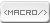
<style>
.page{position:relative;width:50px;height:23px}
.page>*{position:absolute;margin:0}
.t1{font:8px "04b08";color:#807f7f}
</style>
<div class="page">
<p class="t1" style="left:4px;top:10px;width:43px;height:5px">&lt;MACRO/&gt;</p>
</div>
